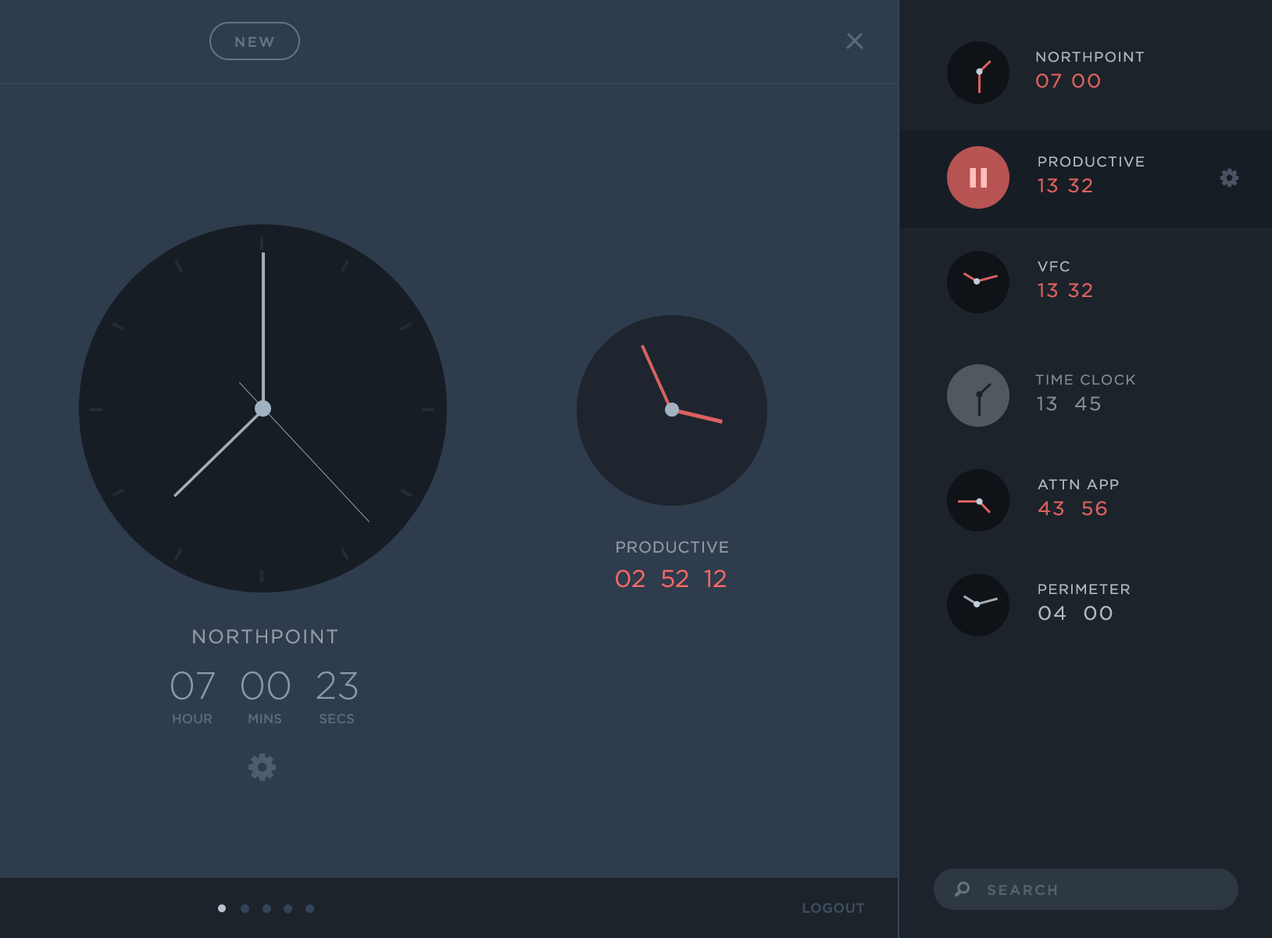
<style>
.page{position:relative;width:1272px;height:938px;background:#2e3c4d}
.page>*{position:absolute;margin:0}
.t1{font:13.8px "GothamHTF-Book";letter-spacing:0.08em;color:#b0bac3}
.t2{font:19.1px "GothamHTF-Book";letter-spacing:0.08em;color:#da615f;scale:1.03 1}
.t3{font:13.8px "GothamHTF-Book";letter-spacing:0.08em;color:#848d96}
.t4{font:19.1px "GothamHTF-Book";letter-spacing:0.08em;color:#848d96;scale:1.03 1}
.t5{font:19.1px "GothamHTF-Book";letter-spacing:0.08em;color:#b0bac3;scale:1.03 1}
.t6{font:13.9px "GothamHTF-Medium";letter-spacing:0.15em;color:#57616b}
</style>
<div class="page">
<p class="t1" style="left:1036px;top:52px;width:108px;height:11px">NORTHPOINT</p>
<p class="t2" style="left:1036px;top:73px;width:64px;height:15px">07 00</p>
<p class="t1" style="left:1038px;top:156px;width:106px;height:11px">PRODUCTIVE</p>
<p class="t2" style="left:1038px;top:178px;width:54px;height:15px">13 32</p>
<p class="t1" style="left:1038px;top:261px;width:32px;height:11px">VFC</p>
<p class="t2" style="left:1038px;top:283px;width:54px;height:15px">13 32</p>
<p class="t3" style="left:1035px;top:374px;width:100px;height:11px">TIME CLOCK</p>
<p class="t4" style="left:1037px;top:396px;width:63px;height:15px">13  45</p>
<p class="t1" style="left:1038px;top:479px;width:81px;height:10px">ATTN APP</p>
<p class="t2" style="left:1038px;top:501px;width:69px;height:15px">43  56</p>
<p class="t1" style="left:1038px;top:584px;width:92px;height:10px">PERIMETER</p>
<p class="t5" style="left:1038px;top:605px;width:75px;height:15px">04  00</p>
<p class="t6" style="left:988px;top:884px;width:69px;height:11px">SEARCH</p>
</div>
